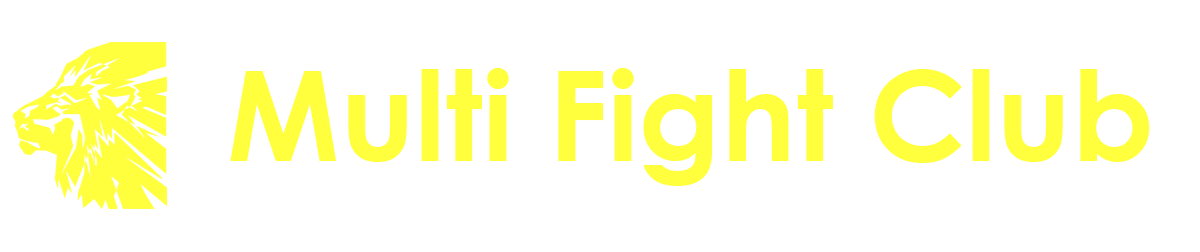
<style>
.page{position:relative;width:1200px;height:252px;background:#ffffff}
.page>*{position:absolute;margin:0}
.t1{font:125.3px "CenturyGothic-Bold";color:#ffff3d}
</style>
<div class="page">
<p class="t1" style="left:230px;top:68px;width:920px;height:118px">Multi Fight Club</p>
</div>
